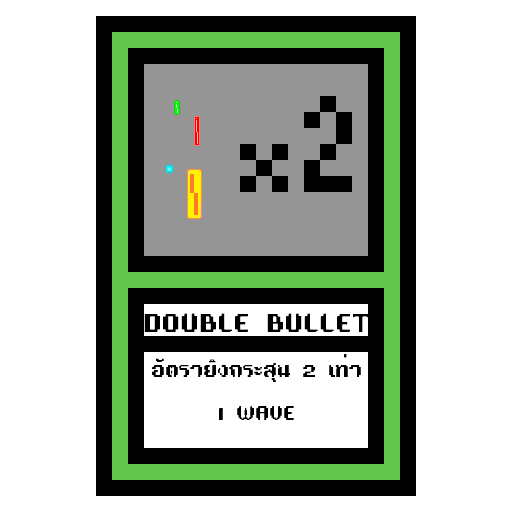
<style>
.page{position:relative;width:512px;height:512px;background:#ffffff}
.page>*{position:absolute;margin:0}
.t1{font:24px "TA16BIT-Regular";color:#000000}
.t2{font:18px "TA16BIT-Regular";color:#000000}
</style>
<div class="page">
<p class="t1" style="left:144px;top:313px;width:225px;height:19px">DOUBLE BULLET</p>
<p class="t2" style="left:152px;top:354px;width:209px;height:66px;text-align:center">อัตรายิงกระสุน 2 เท่า<br><br>1 WAVE</p>
</div>
